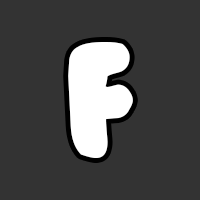
<style>
.page{position:relative;width:200px;height:200px;background:#333333}
.page>*{position:absolute;margin:0}
.t1{font:150px "BubbleGum";color:#ffffff}
</style>
<div class="page">
<p class="t1" style="left:68px;top:42px;width:65px;height:116px">F</p>
</div>
